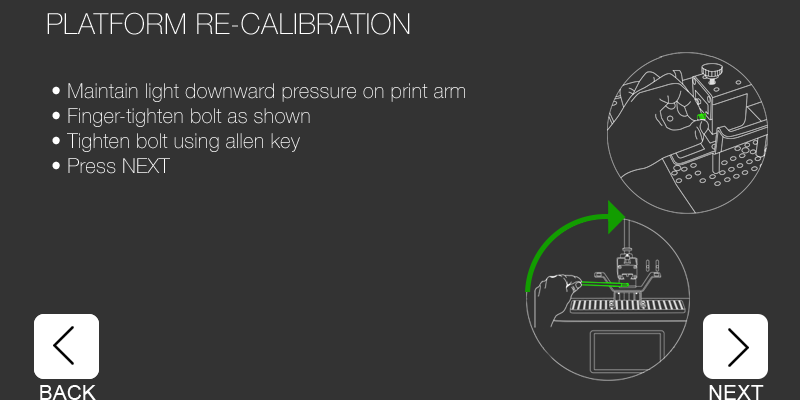
<style>
.page{position:relative;width:800px;height:400px;background:#333333}
.page>*{position:absolute;margin:0}
.t1{font:20.8px "HelveticaNeue-Thin";color:#ffffff}
</style>
<div class="page">
<p class="t1" style="left:52px;top:83px;width:413px;height:91px">• Maintain light downward pressure on print arm<br>• Finger-tighten bolt as shown<br>• Tighten bolt using allen key<br>• Press NEXT</p>
</div>
